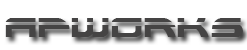
<style>
.page{position:relative;width:247px;height:50px;background:#ffffff}
.page>*{position:absolute;margin:0}
.t1{font:52px "AlexisLaser";color:#454444}
</style>
<div class="page">
<p class="t1" style="left:5px;top:18px;width:238px;height:19px">Apworks</p>
</div>
